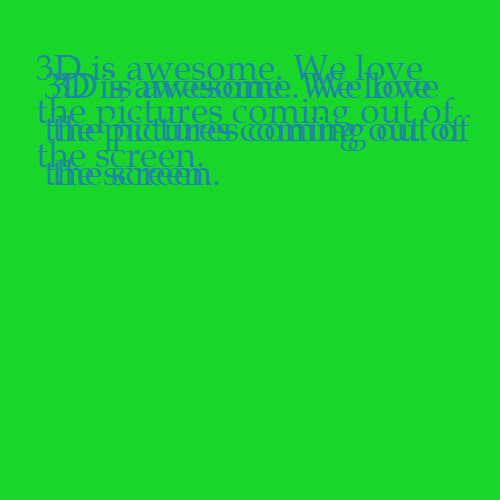
<style>
.page{position:relative;width:500px;height:500px;background:#18d62a}
.page>*{position:absolute;margin:0}
.t1{font:36px "BookAntiqua";color:#1f899c}
</style>
<div class="page">
<p class="t1" style="left:36px;top:54px;width:418px;height:113px">3D is awesome. We love the pictures coming out of the screen.</p>
<p class="t1" style="left:44px;top:72px;width:418px;height:113px">3D is awesome. We love the pictures coming out of the screen.</p>
<p class="t1" style="left:52px;top:72px;width:418px;height:113px">3D is awesome. We love the pictures coming out of the screen.</p>
</div>
